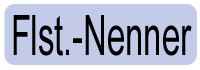
<style>
.page{position:relative;width:200px;height:70px;background:#c3cbe8}
.page>*{position:absolute;margin:0}
.t1{font:55.8px "ArialMT";color:#000000;scale:0.59 1}
</style>
<div class="page">
<p class="t1" style="left:13px;top:15px;width:179px;height:41px">Flst.-Nenner</p>
</div>
